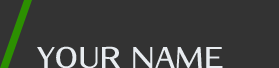
<style>
.page{position:relative;width:279px;height:68px;background:#333333}
.page>*{position:absolute;margin:0}
.t1{font:30px "Iwona-Bold";color:#e8ecf0}
</style>
<div class="page">
<p class="t1" style="left:37px;top:46px;width:186px;height:23px">YOUR NAME</p>
</div>
